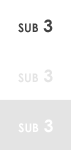
<style>
.page{position:relative;width:71px;height:150px;background:#ffffff}
.page>*{position:absolute;margin:0}
.t1{font:17px "CenturyGothic-Bold";color:#424242;font-variant:small-caps}
.t2{font:17px "CenturyGothic-Bold";color:#e4e4e4;font-variant:small-caps}
.t3{font:17px "CenturyGothic-Bold";color:#ffffff;font-variant:small-caps}
</style>
<div class="page">
<p class="t1" style="left:18px;top:19px;width:35px;height:14px">sub 3</p>
<p class="t2" style="left:18px;top:69px;width:35px;height:14px">sub 3</p>
<p class="t3" style="left:18px;top:119px;width:35px;height:14px">sub 3</p>
</div>
